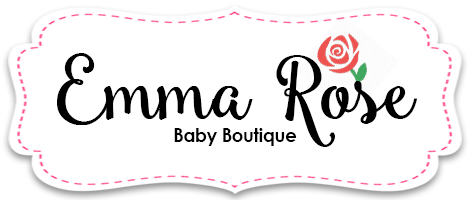
<style>
.page{position:relative;width:470px;height:200px;background:#ffffff}
.page>*{position:absolute;margin:0}
.t1{font:83.3px "Smoothie_Shoppe";color:#000000}
.t2{font:4.5px "CenturyGothic-Bold";color:#000000;scale:0.93 1}
</style>
<div class="page">
<p class="t1" style="left:57px;top:53px;width:361px;height:94px">Emma Rose</p>
<p class="t2" style="left:174px;top:128px;width:123px;height:18px">Baby Boutique</p>
</div>
